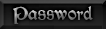
<style>
.page{position:relative;width:106px;height:29px}
.page>*{position:absolute;margin:0}
.t1{font:21px "MorrisRomanAlternate-Black"}
</style>
<div class="page">
<p class="t1" style="left:13px;top:6px;width:80px;height:18px">Password</p>
</div>
